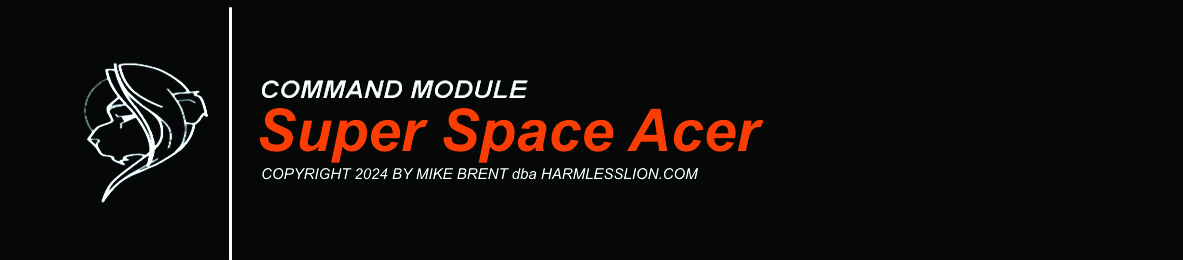
<style>
.page{position:relative;width:1183px;height:260px;background:#060808}
.page>*{position:absolute;margin:0}
.t1{font:59px "Arial-BoldItalicMT";color:#f93d04}
.t2{font:15px "Arial-ItalicMT";color:#fefefe}
</style>
<div class="page">
<p class="t1" style="left:259px;top:108px;width:505px;height:55px">Super Space Acer</p>
<p class="t2" style="left:262px;top:168px;width:437px;height:12px">COPYRIGHT 2024 BY MIKE BRENT dba HARMLESSLION.COM</p>
</div>
